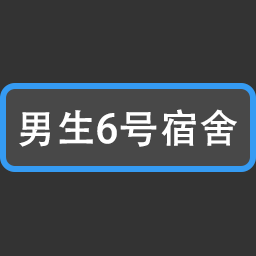
<style>
.page{position:relative;width:256px;height:256px;background:#333333}
.page>*{position:absolute;margin:0}
.t1{font:39px "AdobeHeitiStd-Regular";color:#ffffff;font-weight:bold}
</style>
<div class="page">
<p class="t1" style="left:19px;top:109px;width:218px;height:38px">男生6号宿舍</p>
</div>
